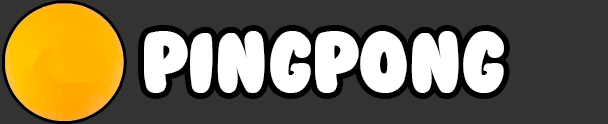
<style>
.page{position:relative;width:608px;height:124px;background:#333333}
.page>*{position:absolute;margin:0}
.t1{font:80px "BubbleGum";color:#ffffff}
</style>
<div class="page">
<p class="t1" style="left:144px;top:31px;width:360px;height:62px">PingPong</p>
</div>
